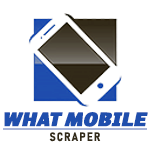
<style>
.page{position:relative;width:150px;height:150px;background:#ffffff}
.page>*{position:absolute;margin:0}
.t1{font:19.5px/15px "Frock-BlackItalic";color:#1f4ead;font-weight:bold;text-decoration:underline}
.t2{font:12px/15px "Bahnschrift-BoldSemiCondensed";letter-spacing:0.1em;color:#322a18;font-weight:bold}
</style>
<div class="page">
<p class="t1" style="left:3px;top:112px;width:145px;height:30px;text-align:center">WHAT MOBILE<br><span class="t2">SCRAPER</span></p>
</div>
